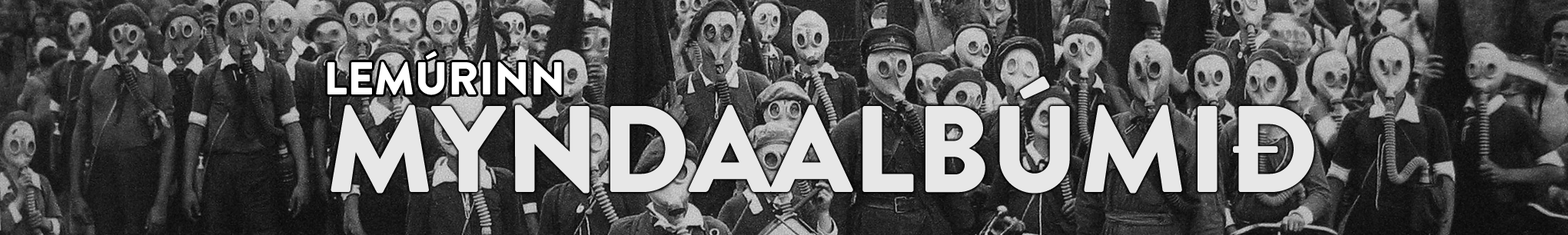
<style>
.page{position:relative;width:1568px;height:235px}
.page>*{position:absolute;margin:0}
.t1{font:46.1px "BrandonGrotesque-Black";color:#ffffff}
.t2{font:123px "BrandonGrotesque-Black";color:#e7e7e7}
</style>
<div class="page">
<p class="t1" style="left:327px;top:51px;width:235px;height:44px">LEMÚRINN</p>
<p class="t2" style="left:331px;top:76px;width:983px;height:118px">MYNDAALBÚMIÐ</p>
</div>
